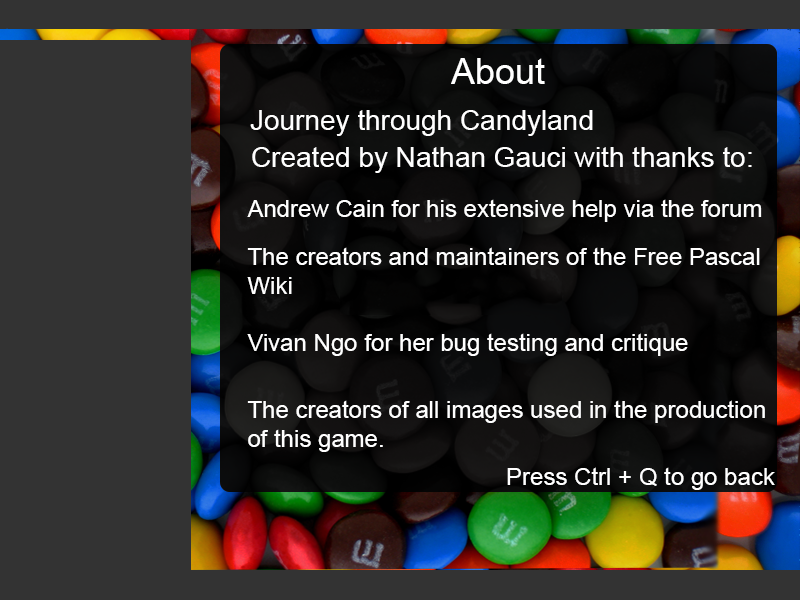
<style>
.page{position:relative;width:800px;height:600px;background:#333333}
.page>*{position:absolute;margin:0}
.t1{font:36px "ArialMT";color:#ffffff}
.t2{font:28px "ArialMT";color:#ffffff}
.t3{font:24px "ArialMT";color:#ffffff}
</style>
<div class="page">
<p class="t1" style="left:451px;top:58px;width:94px;height:26px">About</p>
<p class="t2" style="left:250px;top:110px;width:343px;height:26px">Journey through Candyland</p>
<p class="t2" style="left:252px;top:147px;width:500px;height:26px">Created by Nathan Gauci with thanks to:</p>
<p class="t3" style="left:247px;top:199px;width:515px;height:23px">Andrew Cain for his extensive help via the forum</p>
<p class="t3" style="left:247px;top:247px;width:513px;height:47px">The creators and maintainers of the Free Pascal<br>Wiki</p>
<p class="t3" style="left:247px;top:333px;width:441px;height:23px">Vivan Ngo for her bug testing and critique</p>
<p class="t3" style="left:247px;top:400px;width:518px;height:52px">The creators of all images used in the production<br>of this game.</p>
<p class="t3" style="left:507px;top:467px;width:268px;height:23px">Press Ctrl + Q to go back</p>
</div>
